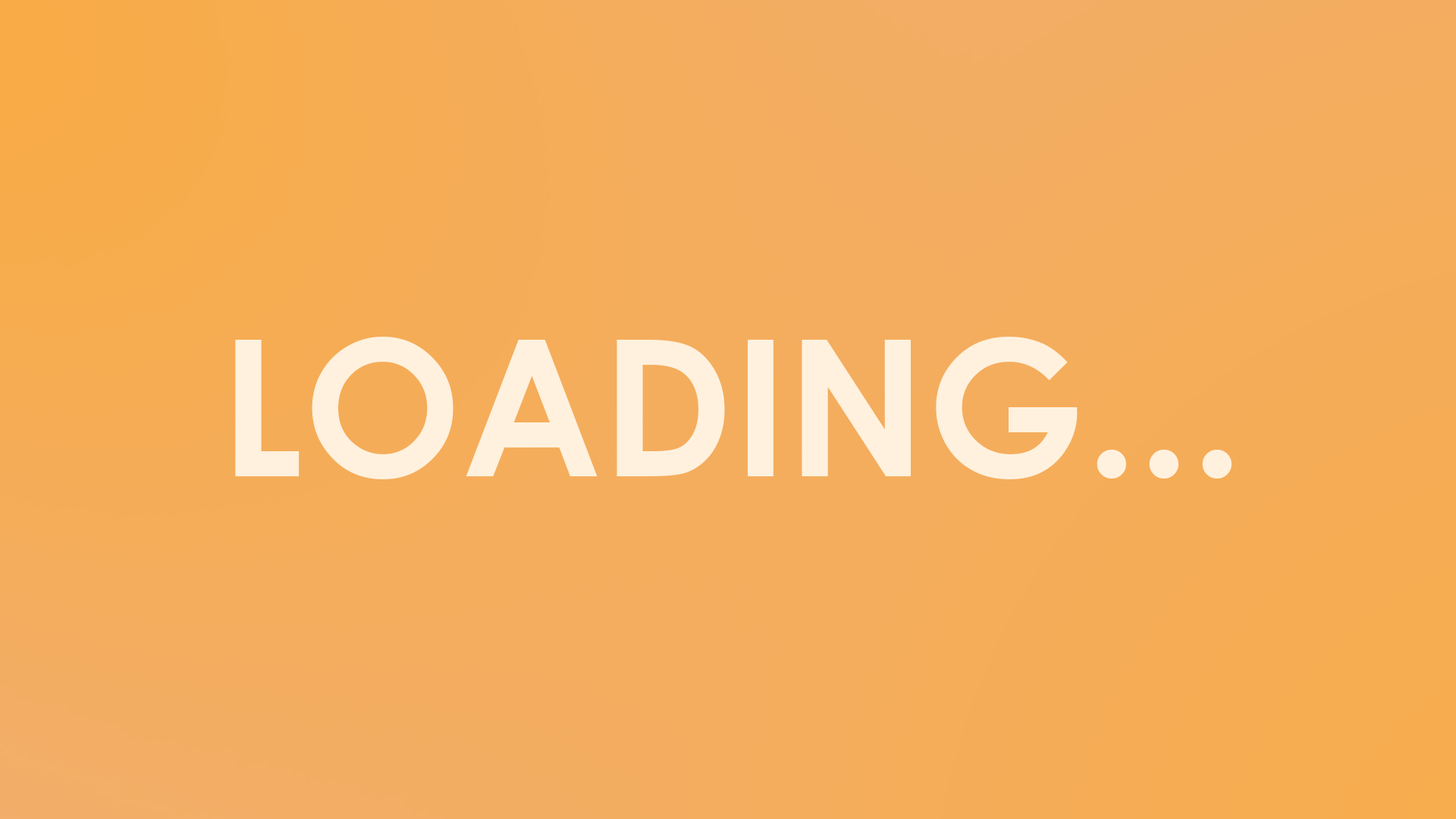
<style>
.page{position:relative;width:1456px;height:819px}
.page>*{position:absolute;margin:0}
.t1{font:189.6px "CenturyGothic-Bold";color:#fff1dd}
.t2{font:49px "CenturyGothic-Bold";color:#8f8b8b}
</style>
<div class="page">
<p class="t1" style="left:235px;top:337px;width:997px;height:142px"><span class="t2"><br><br><br></span><br>LOADING...</p>
</div>
